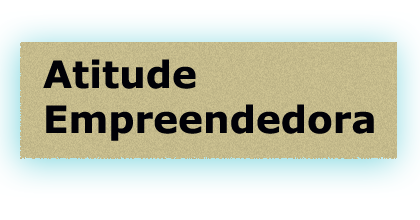
<style>
.page{position:relative;width:420px;height:220px}
.page>*{position:absolute;margin:0}
.t1{font:37.5px "Verdana-Bold";color:#010107}
</style>
<div class="page">
<p class="t1" style="left:43px;top:59px;width:331px;height:82px">Atitude <br>Empreendedora</p>
</div>
